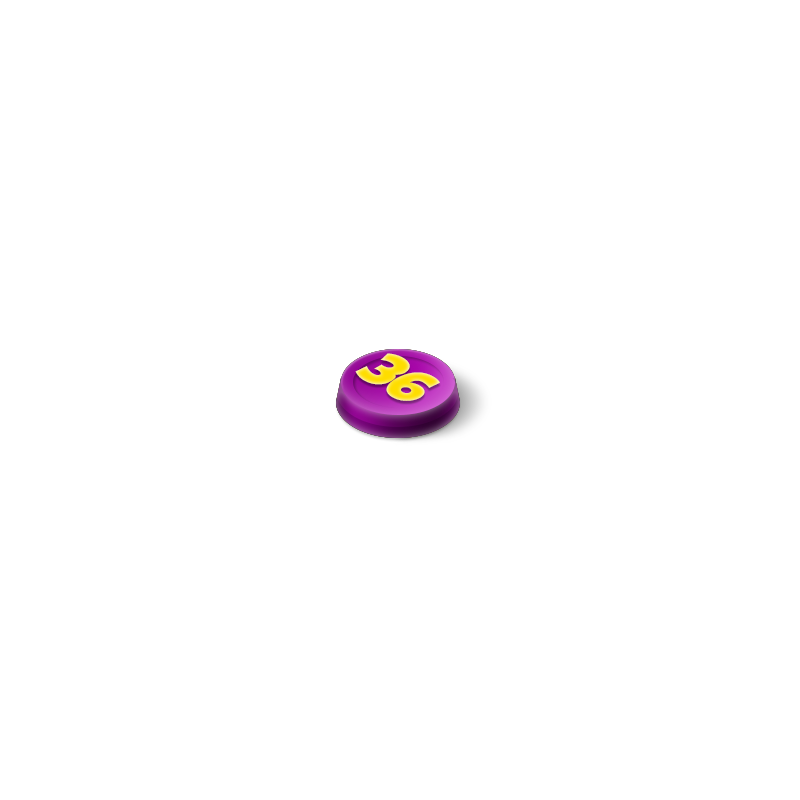
<style>
.page{position:relative;width:800px;height:800px;background:#ffffff}
.page>*{position:absolute;margin:0}
.t1{font:60px "LuckiestGuy-Regular";letter-spacing:-0.03em}
</style>
<div class="page">
<p class="t1" style="left:355px;top:353px;width:85px;height:48px;rotate:30deg">36</p>
</div>
